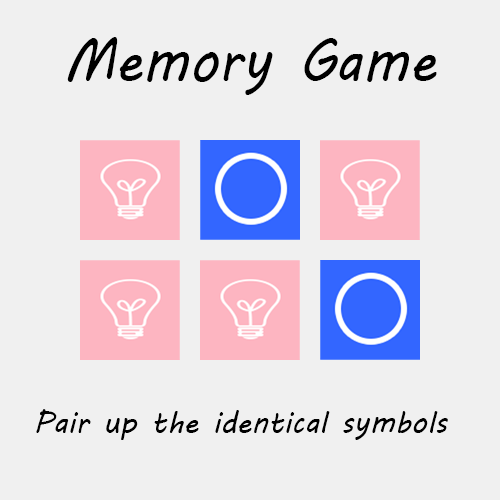
<style>
.page{position:relative;width:500px;height:500px;background:#f0f0f0}
.page>*{position:absolute;margin:0}
.t1{font:60px "MVBoli";color:#000000;scale:0.92 1}
.t2{font:30px "MVBoli";color:#000000}
</style>
<div class="page">
<p class="t1" style="left:67px;top:37px;width:370px;height:58px">Memory Game</p>
<p class="t2" style="left:36px;top:409px;width:412px;height:31px">Pair up the identical symbols</p>
</div>
